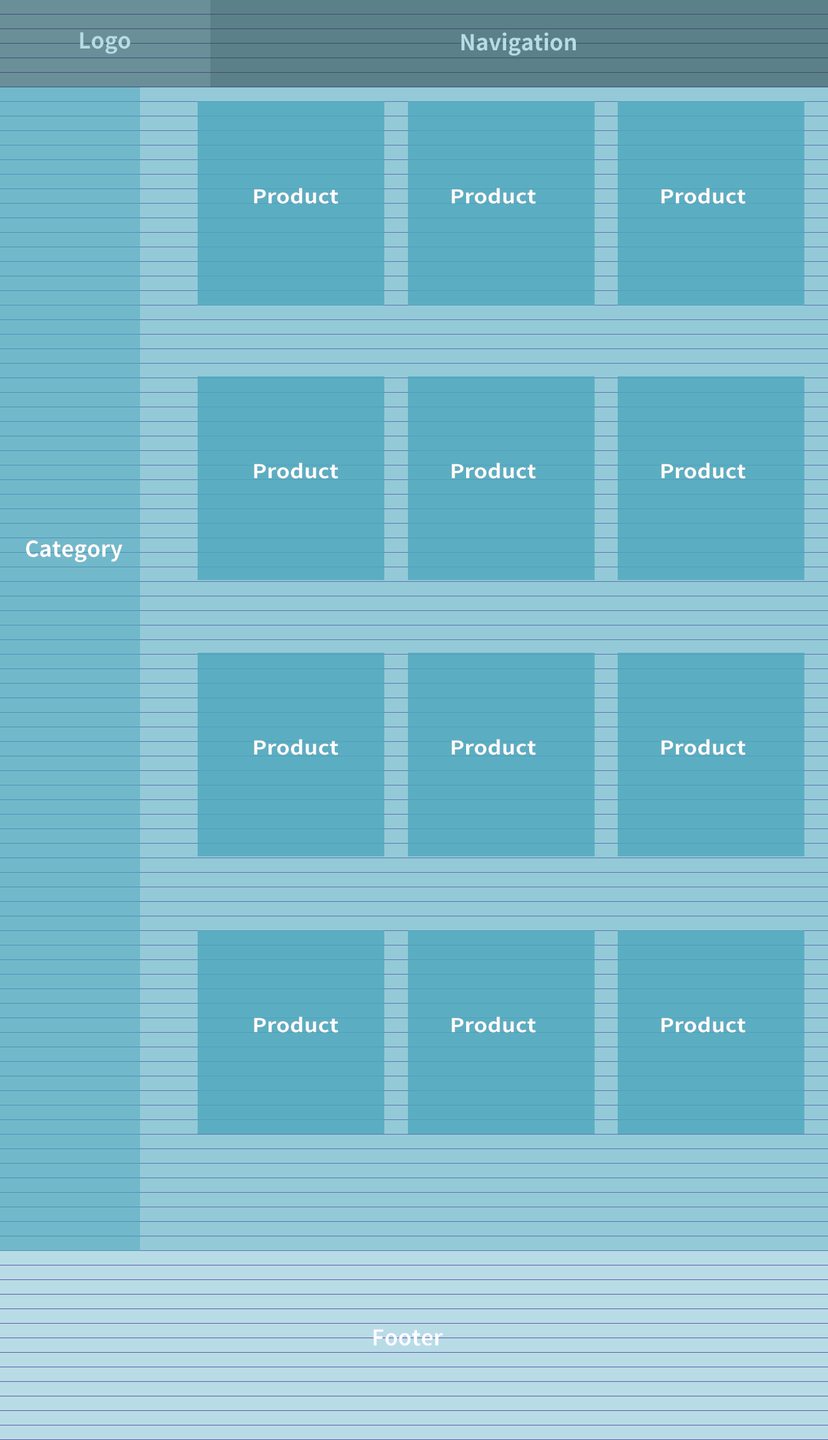
<style>
.page{position:relative;width:828px;height:1440px;background:#5baec2}
.page>*{position:absolute;margin:0}
.t1{font:21.8px "SpoqaHanSans-Bold";color:#b8dce5}
.t2{font:19.2px "SpoqaHanSans-Bold";color:#ffffff;scale:1.14 1}
.t3{font:19.1px "SpoqaHanSans-Bold";color:#ffffff;scale:1.14 1}
.t4{font:21.8px "SpoqaHanSans-Bold";color:#ffffff}
</style>
<div class="page">
<p class="t1" style="left:80px;top:32px;width:50px;height:22px">Logo</p>
<p class="t1" style="left:461px;top:32px;width:115px;height:24px">Navigation</p>
<p class="t2" style="left:254px;top:188px;width:84px;height:16px">Product</p>
<p class="t2" style="left:452px;top:188px;width:84px;height:16px">Product</p>
<p class="t2" style="left:661px;top:188px;width:85px;height:16px">Product</p>
<p class="t3" style="left:254px;top:462px;width:84px;height:17px">Product</p>
<p class="t3" style="left:452px;top:462px;width:84px;height:17px">Product</p>
<p class="t3" style="left:661px;top:462px;width:85px;height:17px">Product</p>
<p class="t4" style="left:26px;top:540px;width:96px;height:22px">Category</p>
<p class="t3" style="left:254px;top:739px;width:84px;height:16px">Product</p>
<p class="t3" style="left:452px;top:739px;width:84px;height:16px">Product</p>
<p class="t3" style="left:661px;top:739px;width:85px;height:16px">Product</p>
<p class="t3" style="left:254px;top:1016px;width:84px;height:17px">Product</p>
<p class="t3" style="left:452px;top:1016px;width:84px;height:17px">Product</p>
<p class="t3" style="left:661px;top:1016px;width:85px;height:17px">Product</p>
<p class="t4" style="left:373px;top:1329px;width:70px;height:17px">Footer</p>
</div>
